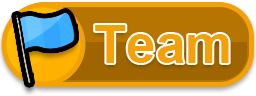
<style>
.page{position:relative;width:256px;height:96px}
.page>*{position:absolute;margin:0}
.t1{font:53.1px "Arial-BoldMT";color:#f2a207}
</style>
<div class="page">
<p class="t1" style="left:95px;top:25px;width:134px;height:38px">Team</p>
</div>
